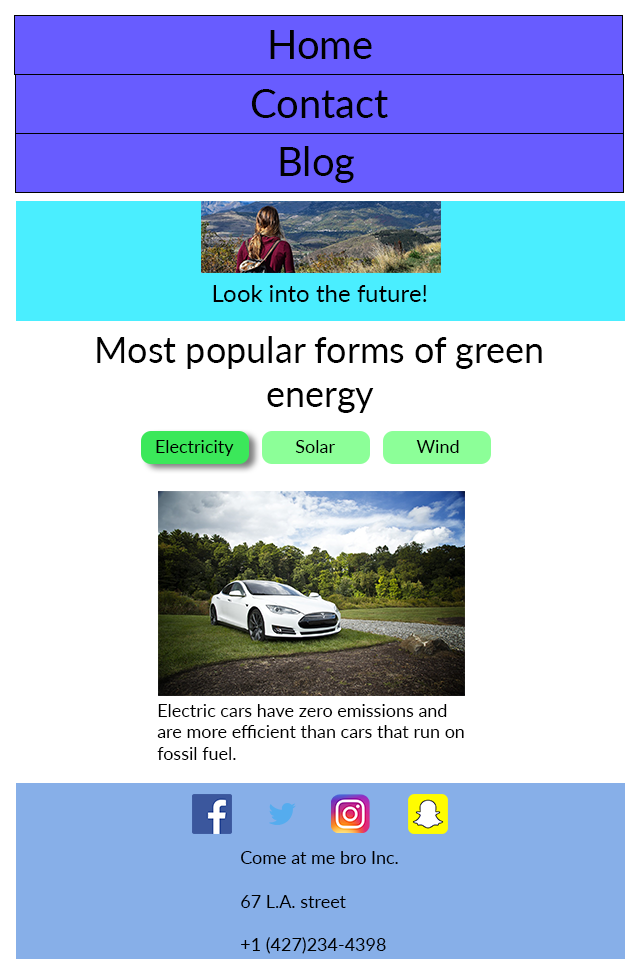
<style>
.page{position:relative;width:640px;height:960px;background:#ffffff}
.page>*{position:absolute;margin:0}
.t1{font:40px "Lato-Regular";color:#000000}
.t2{font:24px "Lato-Regular";color:#000000}
.t3{font:36px "Lato-Regular";color:#000000}
.t4{font:18px "Lato-Regular";color:#000000}
</style>
<div class="page">
<p class="t1" style="left:270px;top:30px;width:102px;height:29px">Home</p>
<p class="t1" style="left:251px;top:89px;width:137px;height:29px">Contact</p>
<p class="t1" style="left:280px;top:146px;width:74px;height:37px">Blog</p>
<p class="t2" style="left:213px;top:285px;width:214px;height:17px">Look into the future!</p>
<p class="t3" style="left:97px;top:336px;width:445px;height:77px;text-align:center">Most popular forms of green energy</p>
<p class="t4" style="left:156px;top:440px;width:78px;height:16px">Electricity</p>
<p class="t4" style="left:295px;top:440px;width:40px;height:13px">Solar</p>
<p class="t4" style="left:416px;top:440px;width:43px;height:13px">Wind</p>
<p class="t4" style="left:157px;top:704px;width:307px;height:56px">Electric cars have zero emissions and<br>are more efficient than cars that run on <br>fossil fuel.</p>
<p class="t4" style="left:241px;top:851px;width:157px;height:103px">Come at me bro Inc.<br><br>67 L.A. street<br><br>+1 (427)234-4398</p>
</div>
